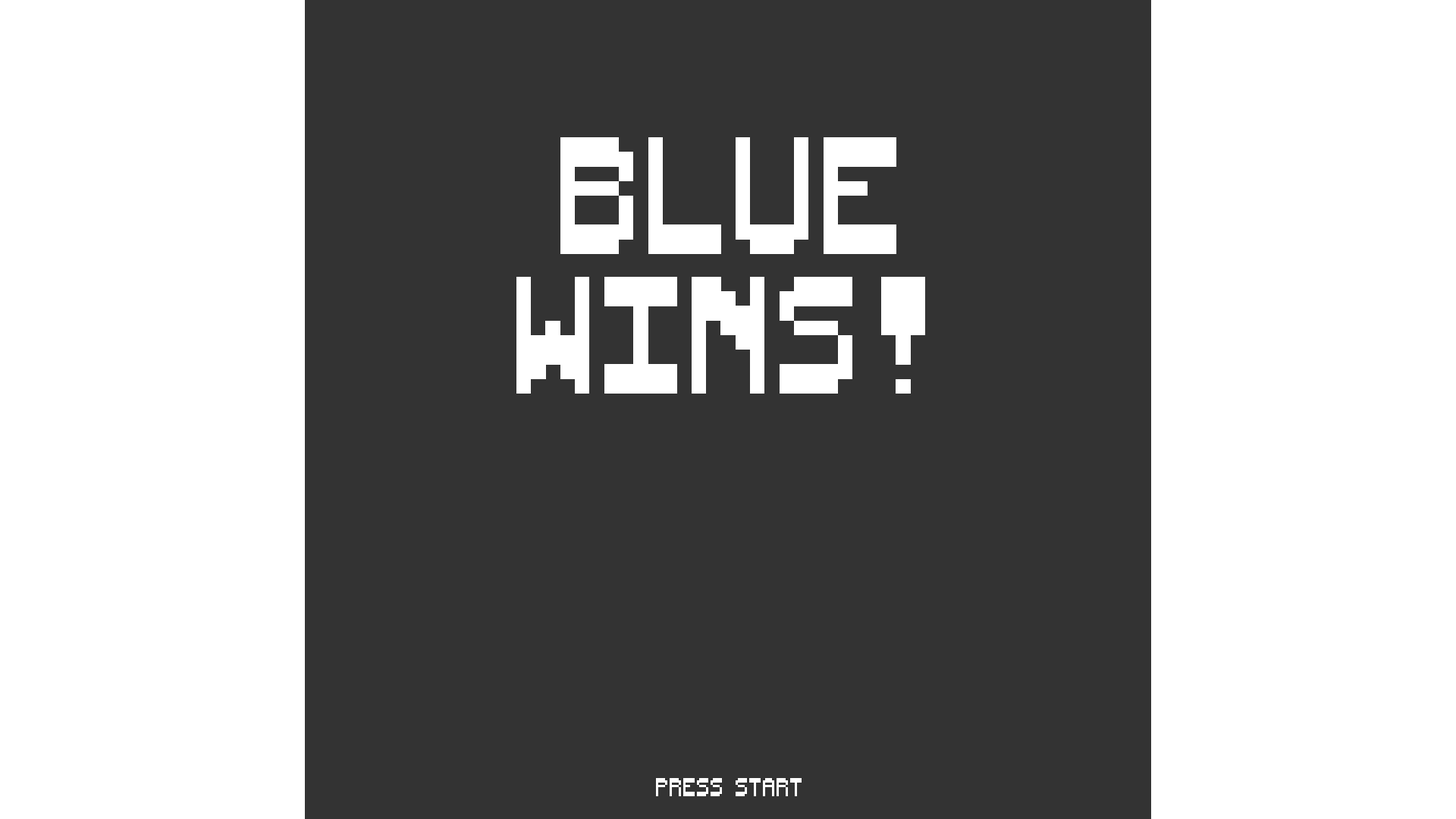
<style>
.page{position:relative;width:1456px;height:819px;background:#333333}
.page>*{position:absolute;margin:0}
.t1{font:116.8px "WildBillYonder";color:#ffffff}
.t2{font:18.2px "WildBillYonder";color:#ffffff}
</style>
<div class="page">
<p class="t1" style="left:516px;top:137px;width:409px;height:257px;text-align:center">BLUE<br>WINS!</p>
<p class="t2" style="left:656px;top:778px;width:146px;height:18px">press start</p>
</div>
